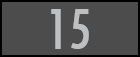
<style>
.page{position:relative;width:140px;height:57px;background:#4c4c4c}
.page>*{position:absolute;margin:0}
.t1{font:53.3px "FuturaCondensed";color:#bebfc1}
</style>
<div class="page">
<p class="t1" style="left:51px;top:9px;width:38px;height:40px">15</p>
</div>
